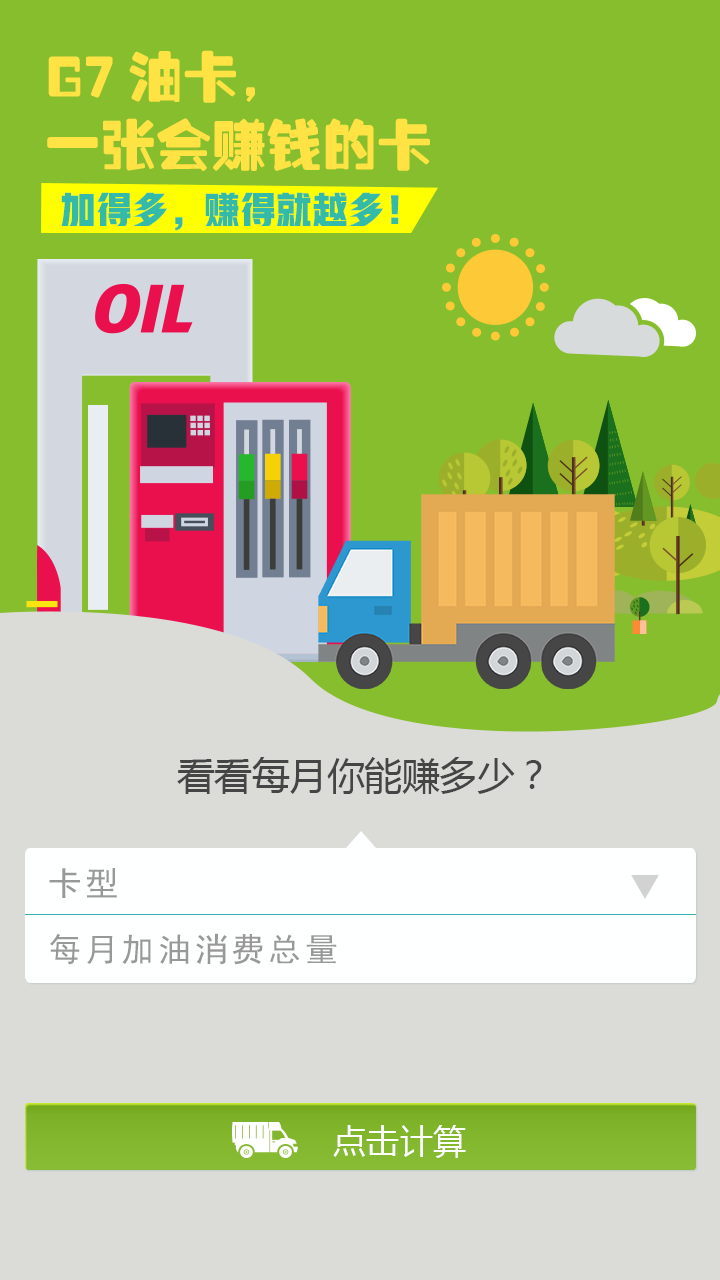
<style>
.page{position:relative;width:720px;height:1280px;background:#dbdbd8}
.page>*{position:absolute;margin:0}
.t1{font:55px/67.9px "Tensentype-JinZhuanHeiJ";color:#ffe244}
.t2{font:36.2px "HYYaKuHeiW";color:#34baa9}
.t3{font:37.5px "MicrosoftYaHei";color:#464546}
.t4{font:33.3px "SimHei";letter-spacing:0.1em;color:#989898}
.t5{font:33.6px "MicrosoftYaHei";color:#feffff}
</style>
<div class="page">
<p class="t1" style="left:47px;top:50px;width:383px;height:121px">G7油卡，<br>一张会赚钱的卡</p>
<p class="t2" style="left:61px;top:192px;width:338px;height:39px">加得多，赚得就越多！</p>
<p class="t3" style="left:177px;top:757px;width:365px;height:37px">看看每月你能赚多少？</p>
<p class="t4" style="left:49px;top:868px;width:68px;height:30px">卡型</p>
<p class="t4" style="left:49px;top:933px;width:288px;height:32px">每月加油消费总量</p>
<p class="t5" style="left:333px;top:1125px;width:133px;height:33px">点击计算</p>
</div>
